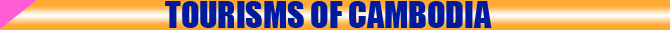
<style>
.page{position:relative;width:670px;height:30px;background:#ffab33}
.page>*{position:absolute;margin:0}
.t1{font:33.7px "Impact";color:#011b9f}
</style>
<div class="page">
<p class="t1" style="left:165px;top:1px;width:327px;height:27px">TOURISMS OF CAMBODIA</p>
</div>
